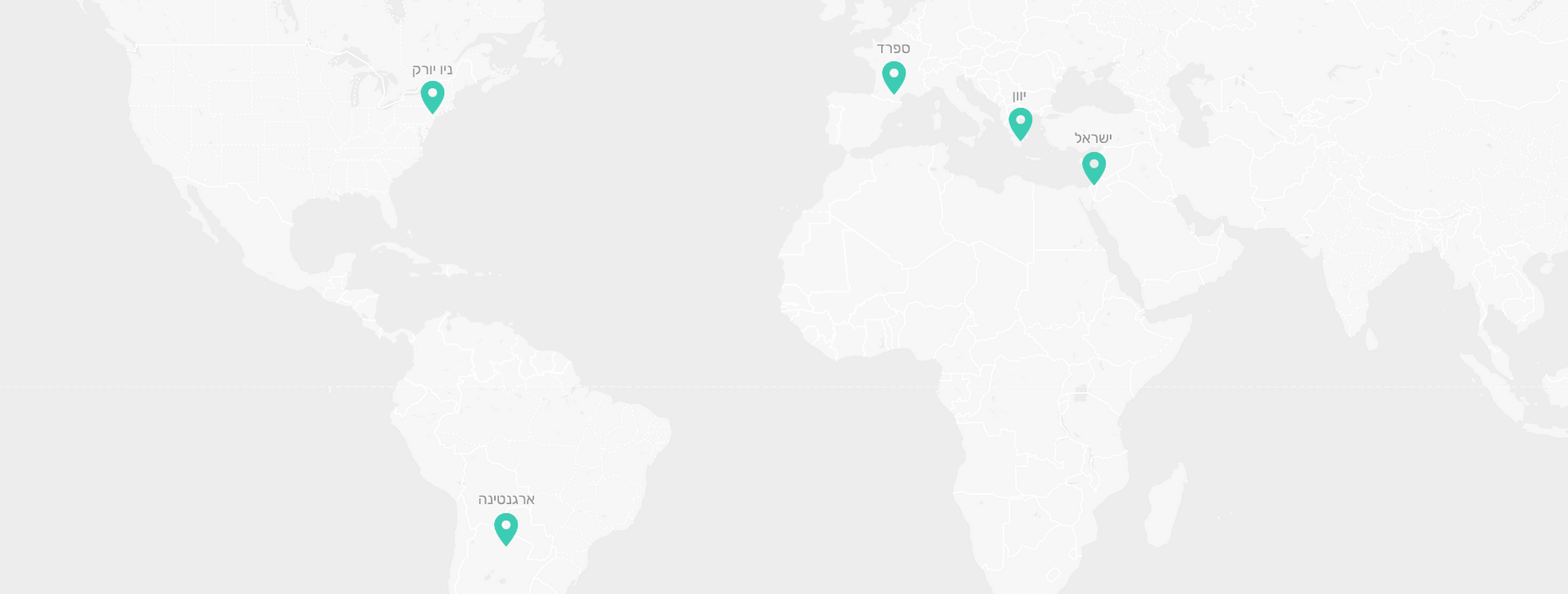
<style>
.page{position:relative;width:1568px;height:594px;background:#ededed}
.page>*{position:absolute;margin:0}
.t1{font:14.7px "Rubik-Regular";color:#999999}
</style>
<div class="page">
<p class="t1" style="left:877px;top:44px;width:33px;height:10px">דרפס</p>
<p class="t1" style="left:412px;top:65px;width:40px;height:13px">קרוי וינ</p>
<p class="t1" style="left:1013px;top:91px;width:13px;height:12px">ןווי</p>
<p class="t1" style="left:1075px;top:132px;width:36px;height:12px">לארשי</p>
<p class="t1" style="left:479px;top:495px;width:56px;height:10px">הניטנגרא</p>
</div>
